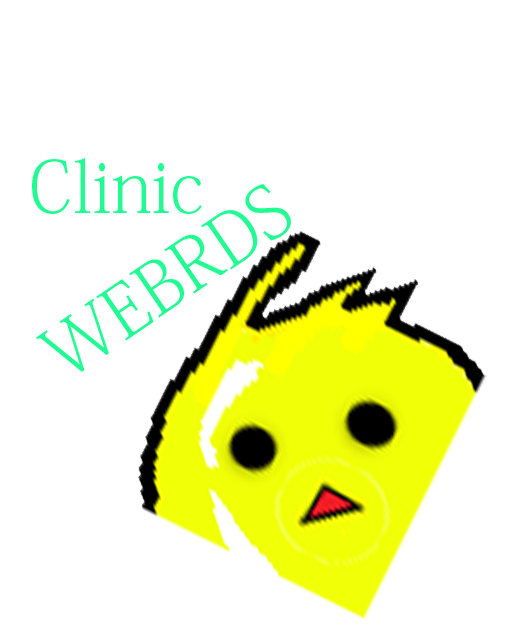
<style>
.page{position:relative;width:516px;height:625px;background:#ffffff}
.page>*{position:absolute;margin:0}
.t1{font:72px "KozMinPr6N-ExtraLight";color:#20fb92}
</style>
<div class="page">
<p class="t1" style="left:32px;top:158px;width:170px;height:56px">Clinic</p>
<p class="t1" style="left:36px;top:184px;width:255px;height:188px;rotate:-34deg">WEBRDS</p>
</div>
